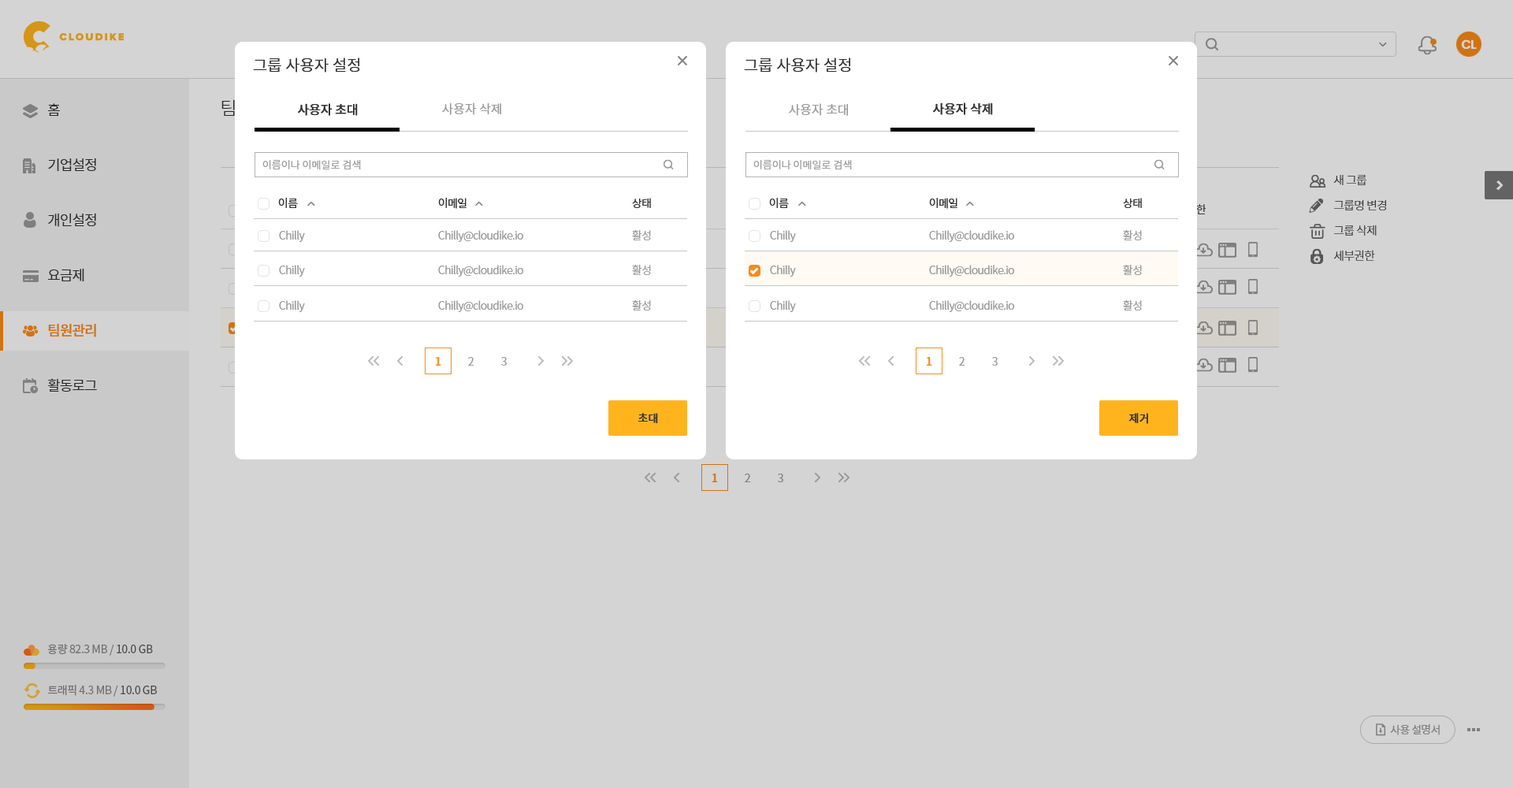
<style>
.page{position:relative;width:1513px;height:788px;background:#d4d4d4}
.page>*{position:absolute;margin:0}
.t1{font:15.8px "NotoSansCJKkr-DemiLight";color:#333333}
.t2{font:12.6px "NotoSansCJKkr-Medium";color:#333333}
.t3{font:12.6px "NotoSansCJKkr-DemiLight";color:#999999}
.t4{font:10.2px "NotoSansCJKkr-DemiLight";color:#999999}
.t5{font:11px "NotoSansCJKkr-Regular";letter-spacing:-0.05em;color:#333333}
.t6{font:11px "NotoSansCJKkr-DemiLight";letter-spacing:-0.05em;color:#999999}
.t7{font:11px "NotoSansCJKkr-Medium";color:#f98a17}
.t8{font:11px "NotoSansCJKkr-DemiLight";color:#999999}
.t9{font:11px "NotoSansCJKkr-Medium";color:#333333}
</style>
<div class="page">
<p class="t1" style="left:253px;top:58px;width:107px;height:15px">그룹 사용자 설정</p>
<p class="t1" style="left:744px;top:58px;width:107px;height:15px">그룹 사용자 설정</p>
<p class="t2" style="left:298px;top:103px;width:60px;height:13px">사용자 초대</p>
<p class="t3" style="left:442px;top:102px;width:59px;height:13px">사용자 삭제</p>
<p class="t3" style="left:789px;top:103px;width:59px;height:13px">사용자 초대</p>
<p class="t2" style="left:933px;top:102px;width:60px;height:13px">사용자 삭제</p>
<p class="t4" style="left:262px;top:160px;width:99px;height:9px">이름이나 이메일로 검색</p>
<p class="t4" style="left:753px;top:160px;width:99px;height:9px">이름이나 이메일로 검색</p>
<p class="t5" style="left:278px;top:198px;width:20px;height:10px">이름</p>
<p class="t5" style="left:438px;top:198px;width:29px;height:11px">이메일</p>
<p class="t5" style="left:632px;top:198px;width:19px;height:10px">상태</p>
<p class="t5" style="left:769px;top:198px;width:20px;height:10px">이름</p>
<p class="t5" style="left:929px;top:198px;width:29px;height:11px">이메일</p>
<p class="t5" style="left:1123px;top:198px;width:19px;height:10px">상태</p>
<p class="t6" style="left:279px;top:230px;width:26px;height:12px">Chilly</p>
<p class="t6" style="left:438px;top:230px;width:85px;height:12px">Chilly@cloudike.io</p>
<p class="t6" style="left:632px;top:230px;width:19px;height:10px">활성</p>
<p class="t6" style="left:770px;top:230px;width:26px;height:12px">Chilly</p>
<p class="t6" style="left:929px;top:230px;width:85px;height:12px">Chilly@cloudike.io</p>
<p class="t6" style="left:1123px;top:230px;width:19px;height:10px">활성</p>
<p class="t6" style="left:279px;top:265px;width:26px;height:12px">Chilly</p>
<p class="t6" style="left:438px;top:265px;width:85px;height:12px">Chilly@cloudike.io</p>
<p class="t6" style="left:632px;top:265px;width:19px;height:10px">활성</p>
<p class="t6" style="left:770px;top:265px;width:26px;height:12px">Chilly</p>
<p class="t6" style="left:929px;top:265px;width:85px;height:12px">Chilly@cloudike.io</p>
<p class="t6" style="left:1123px;top:265px;width:19px;height:10px">활성</p>
<p class="t6" style="left:279px;top:300px;width:26px;height:12px">Chilly</p>
<p class="t6" style="left:438px;top:300px;width:85px;height:12px">Chilly@cloudike.io</p>
<p class="t6" style="left:632px;top:300px;width:19px;height:11px">활성</p>
<p class="t6" style="left:770px;top:300px;width:26px;height:12px">Chilly</p>
<p class="t6" style="left:929px;top:300px;width:85px;height:12px">Chilly@cloudike.io</p>
<p class="t6" style="left:1123px;top:300px;width:19px;height:11px">활성</p>
<p class="t7" style="left:436px;top:357px;width:5px;height:9px">1</p>
<p class="t8" style="left:468px;top:357px;width:6px;height:9px">2</p>
<p class="t8" style="left:501px;top:357px;width:6px;height:9px">3</p>
<p class="t7" style="left:927px;top:357px;width:5px;height:9px">1</p>
<p class="t8" style="left:959px;top:357px;width:6px;height:9px">2</p>
<p class="t8" style="left:992px;top:357px;width:6px;height:9px">3</p>
<p class="t9" style="left:638px;top:413px;width:20px;height:10px">초대</p>
<p class="t9" style="left:1129px;top:413px;width:19px;height:11px">제거</p>
</div>
